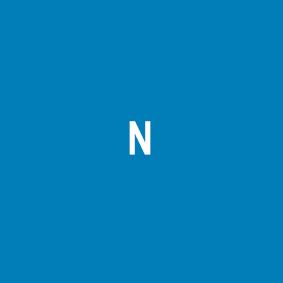
<style>
.page{position:relative;width:283px;height:283px;background:#017eb8}
.page>*{position:absolute;margin:0}
.t1{font:46.2px "Arial-BoldMT";color:#ffffff;scale:0.78 1}
</style>
<div class="page">
<p class="t1" style="left:129px;top:121px;width:22px;height:34px">N</p>
</div>
